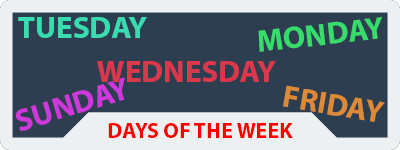
<style>
.page{position:relative;width:400px;height:150px;background:#2c3e50}
.page>*{position:absolute;margin:0}
.t1{font:31.2px "MyriadPro-Bold";color:#38dcb0}
.t2{font:31.2px "MyriadPro-Bold";color:#38dc6a}
.t3{font:31.2px "MyriadPro-Bold";color:#dc384b}
.t4{font:31.2px "MyriadPro-Bold";color:#ce38dc}
.t5{font:31.2px "MyriadPro-Bold";color:#dc8938}
.t6{font:21.9px "MyriadPro-Bold";color:#ff0000}
</style>
<div class="page">
<p class="t1" style="left:18px;top:17px;width:129px;height:21px">TUESDAY</p>
<p class="t2" style="left:258px;top:17px;width:125px;height:35px;rotate:-6deg">MONDAY</p>
<p class="t3" style="left:97px;top:61px;width:179px;height:21px">WEDNESDAY</p>
<p class="t4" style="left:15px;top:77px;width:110px;height:54px;rotate:-17deg">SUNDAY</p>
<p class="t5" style="left:283px;top:85px;width:102px;height:37px;rotate:10deg">FRIDAY</p>
<p class="t6" style="left:108px;top:123px;width:185px;height:15px">DAYS OF THE WEEK</p>
</div>
